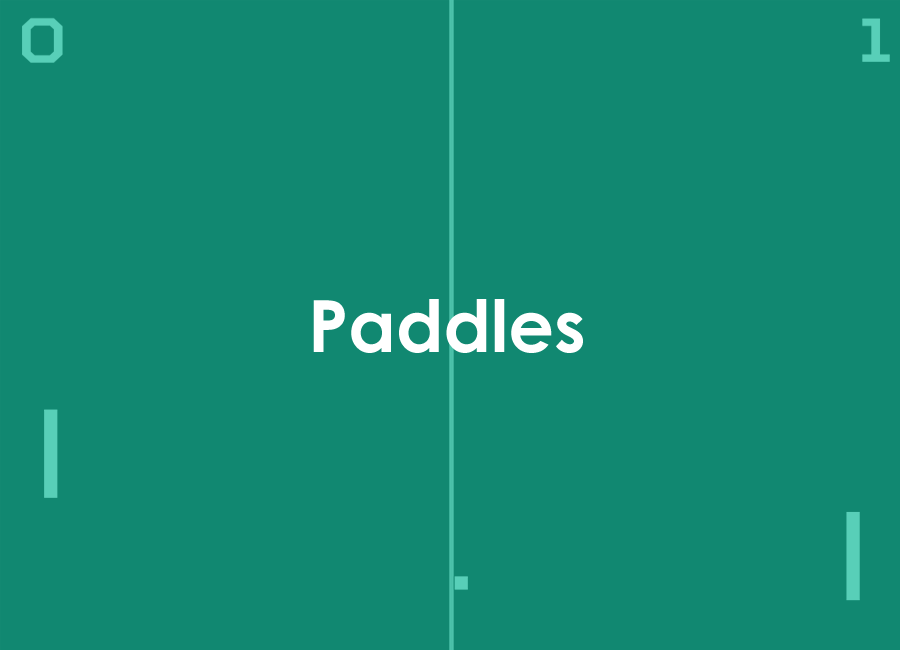
<style>
.page{position:relative;width:900px;height:650px;background:#118871}
.page>*{position:absolute;margin:0}
.t1{font:72px "CenturyGothic-Bold";color:#ffffff}
</style>
<div class="page">
<p class="t1" style="left:313px;top:299px;width:270px;height:54px">Paddles</p>
</div>
